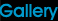
<style>
.page{position:relative;width:58px;height:21px;background:#000000}
.page>*{position:absolute;margin:0}
.t1{font:18px "AvantGardeITCbyBT-Medium";color:#0099cc}
</style>
<div class="page">
<p class="t1" style="left:0px;top:3px;width:58px;height:17px">Gallery</p>
</div>
